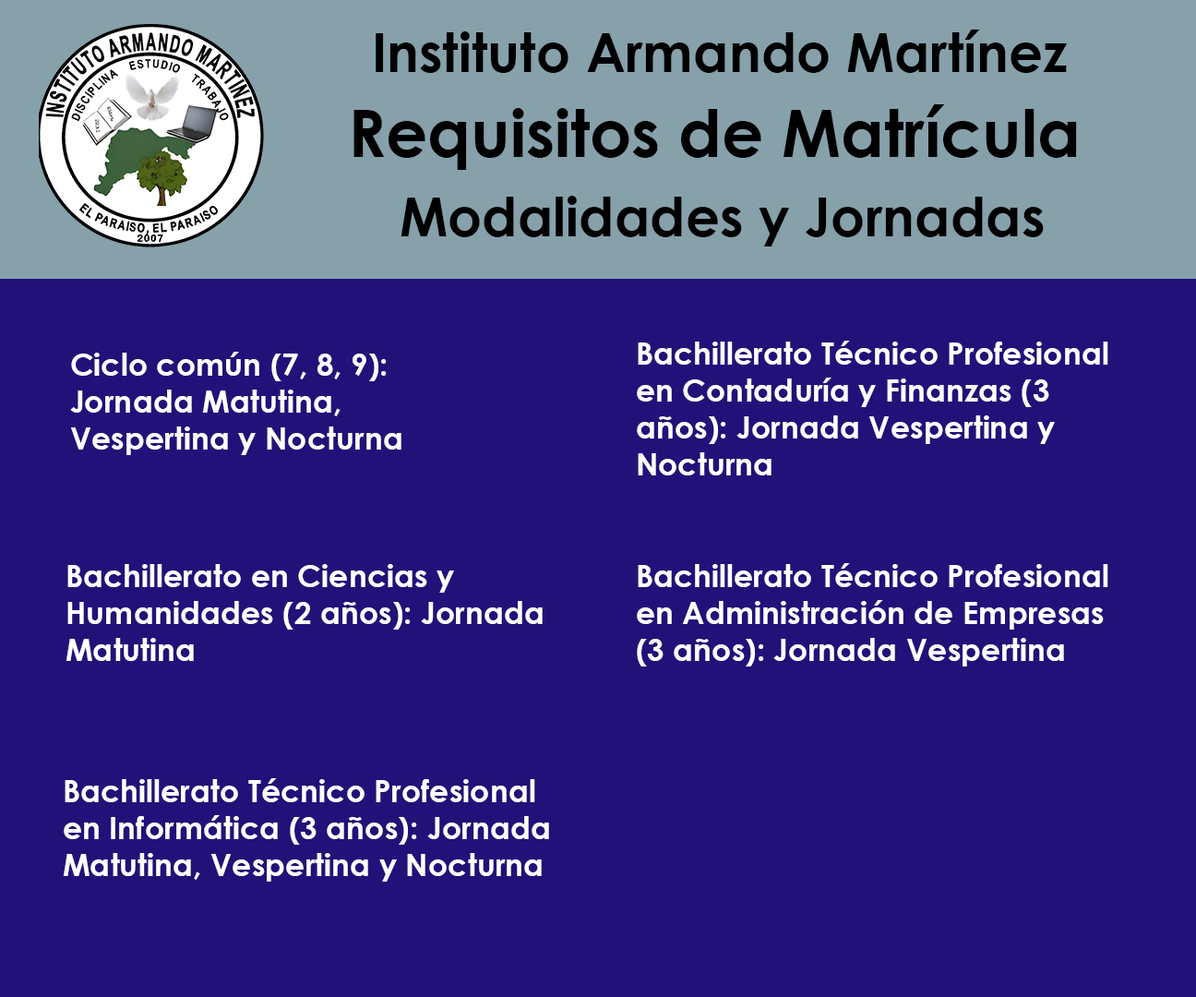
<style>
.page{position:relative;width:1196px;height:997px;background:#221179}
.page>*{position:absolute;margin:0}
.t1{font:53.8px "CenturyGothic-Bold";color:#000000}
.t2{font:65.4px "CenturyGothic-Bold";color:#000000}
.t3{font:30.8px "CenturyGothic-Bold";color:#ffffff}
</style>
<div class="page">
<p class="t1" style="left:376px;top:30px;width:692px;height:43px">Instituto Armando Martínez</p>
<p class="t2" style="left:354px;top:104px;width:723px;height:66px">Requisitos de Matrícula</p>
<p class="t1" style="left:401px;top:196px;width:643px;height:50px">Modalidades y Jornadas</p>
<p class="t3" style="left:637px;top:341px;width:472px;height:134px">Bachillerato Técnico Profesional en Contaduría y Finanzas (3 años): Jornada Vespertina y Nocturna</p>
<p class="t3" style="left:70px;top:352px;width:332px;height:103px">Ciclo común (7, 8, 9): Jornada Matutina, Vespertina y Nocturna</p>
<p class="t3" style="left:66px;top:564px;width:477px;height:97px">Bachillerato en Ciencias y Humanidades (2 años): Jornada Matutina</p>
<p class="t3" style="left:637px;top:563px;width:472px;height:103px">Bachillerato Técnico Profesional en Administración de Empresas (3 años): Jornada Vespertina</p>
<p class="t3" style="left:63px;top:778px;width:486px;height:103px">Bachillerato Técnico Profesional en Informática (3 años): Jornada Matutina, Vespertina y Nocturna</p>
</div>
